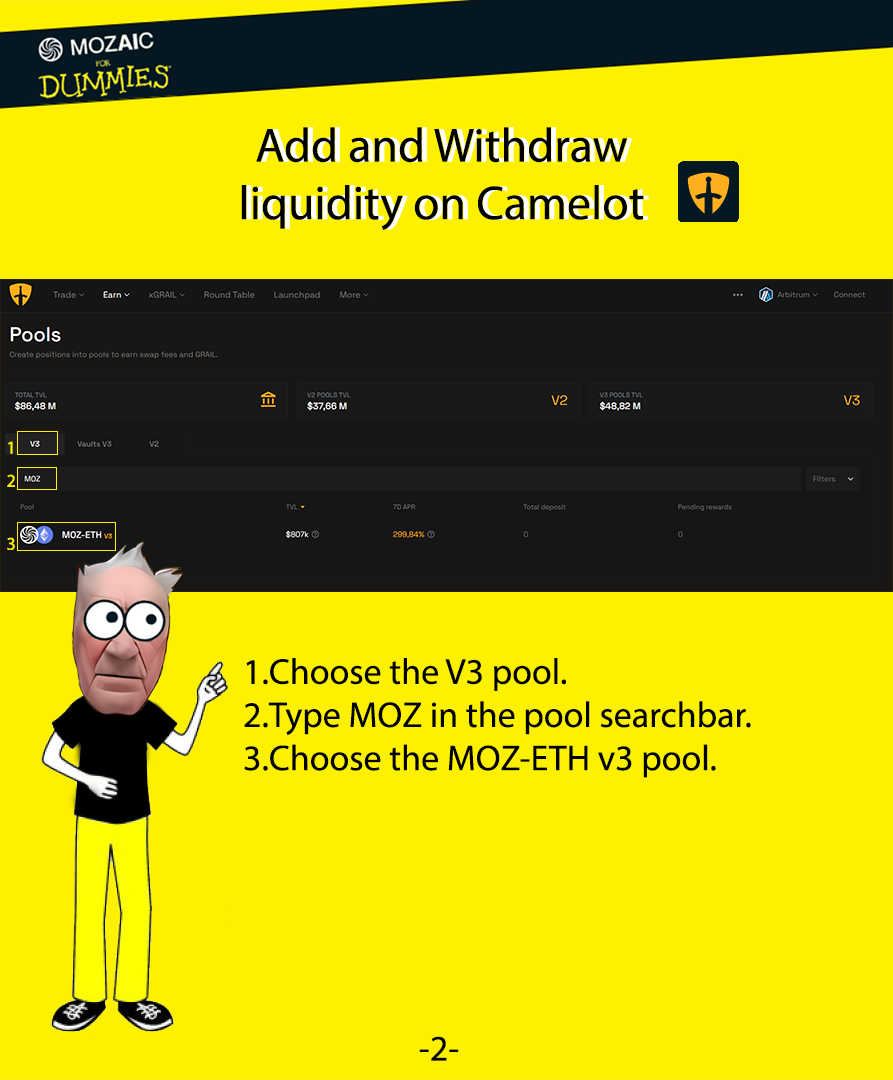
<style>
.page{position:relative;width:893px;height:1080px;background:#fdf100}
.page>*{position:absolute;margin:0}
.t1{font:48px "MyriadPro-Regular";color:#000000}
.t2{font:48px "MyriadPro-Regular";color:#ffffff}
.t3{font:18px "MyriadPro-Regular";color:#fdf100}
.t4{font:36px "MyriadPro-Regular";color:#000000}
.t5{font:36px "MyriadPro-Regular";color:#fdf100}
</style>
<div class="page">
<p class="t1" style="left:241px;top:127px;width:403px;height:103px;text-align:center">Add and Withdraw <br>liquidity on Camelot</p>
<p class="t2" style="left:246px;top:127px;width:403px;height:103px;text-align:center">Add and Withdraw <br>liquidity on Camelot</p>
<p class="t3" style="left:8px;top:441px;width:5px;height:13px">1</p>
<p class="t3" style="left:7px;top:474px;width:8px;height:13px">2</p>
<p class="t3" style="left:7px;top:537px;width:8px;height:13px">3</p>
<p class="t4" style="left:244px;top:658px;width:507px;height:120px"><span class="t5"><br></span>1.Choose the V3 pool.<br>2.Type MOZ in the pool searchbar.<br>3.Choose the MOZ-ETH v3 pool.</p>
<p class="t4" style="left:419px;top:1036px;width:40px;height:25px;text-align:center">-2-<br>--</p>
</div>
